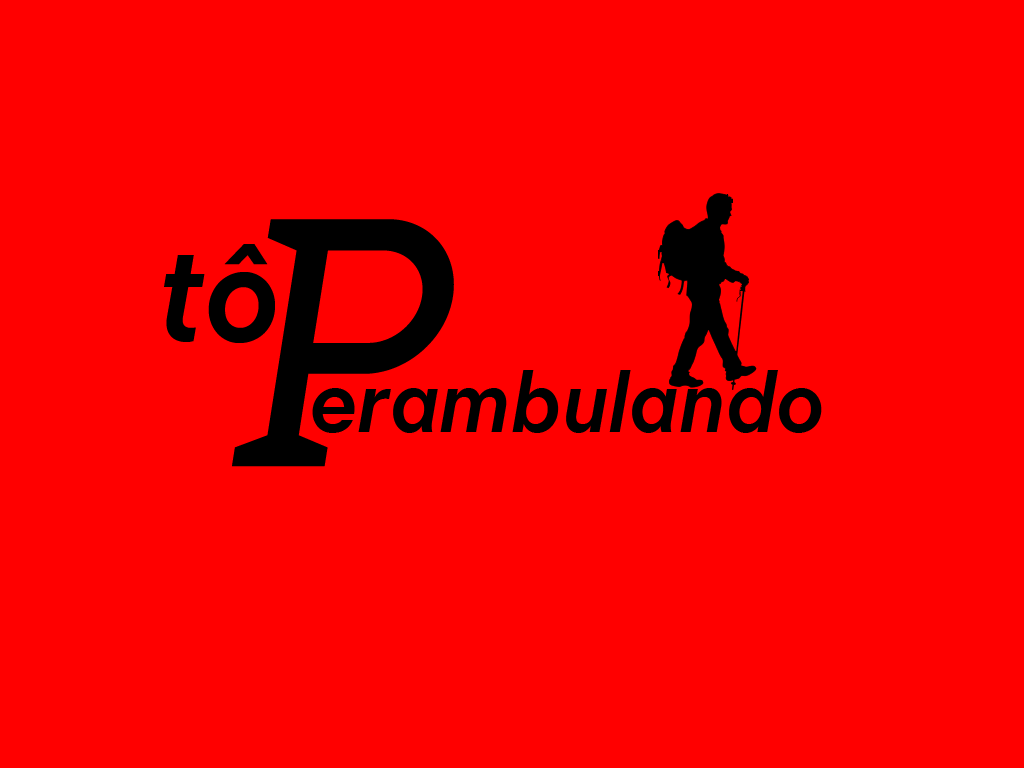
<style>
.page{position:relative;width:1024px;height:768px;background:#ff0000}
.page>*{position:absolute;margin:0}
.t1{font:369.8px "BaseTwelveSerifI";color:#000000}
.t2{font:129.7px "ChaletBook-BoldItalic";color:#000000}
.t3{font:83.4px "ChaletBook-BoldItalic";color:#000000}
</style>
<div class="page">
<p class="t1" style="left:232px;top:219px;width:222px;height:248px">P</p>
<p class="t2" style="left:164px;top:244px;width:111px;height:99px">tô</p>
<p class="t3" style="left:312px;top:370px;width:510px;height:63px">erambulando</p>
</div>
